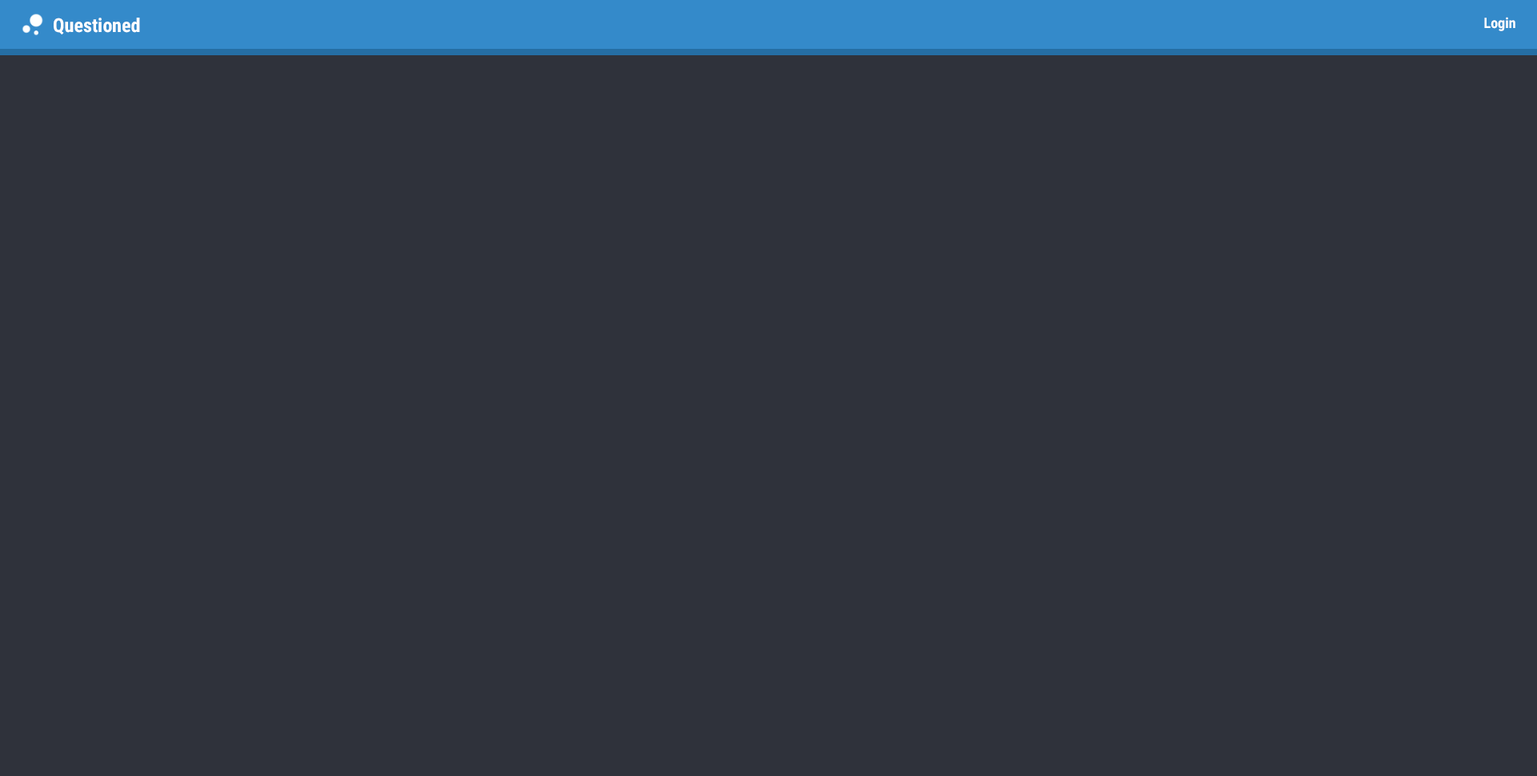
<style>
.page{position:relative;width:1537px;height:776px;background:#2f323b}
.page>*{position:absolute;margin:0}
.t1{font:19.2px "RobotoCondensed-Bold";color:#ffffff}
.t2{font:14.4px "RobotoCondensed-Bold";color:#ffffff}
</style>
<div class="page">
<p class="t1" style="left:54px;top:18px;width:86px;height:16px">Questioned</p>
<p class="t2" style="left:1484px;top:17px;width:31px;height:14px">Login</p>
</div>
